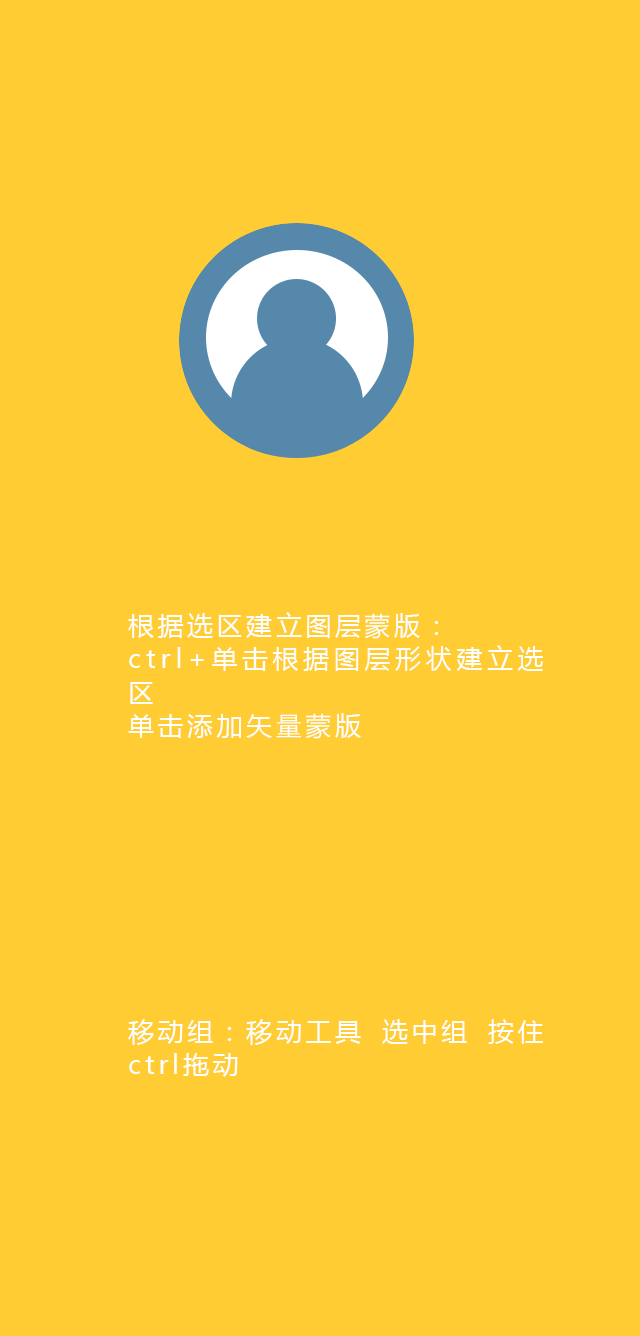
<style>
.page{position:relative;width:640px;height:1336px;background:#ffcc33}
.page>*{position:absolute;margin:0}
.t1{font:25.5px/33.4px "MicrosoftYaHei";letter-spacing:0.16em;color:#ffffff}
</style>
<div class="page">
<p class="t1" style="left:128px;top:612px;width:415px;height:127px;text-align:justify">根据选区建立图层蒙版：<br>ctrl+单击根据图层形状建立选区<br>单击添加矢量蒙版</p>
<p class="t1" style="left:128px;top:1019px;width:415px;height:58px;text-align:justify">移动组：移动工具 选中组 按住ctrl拖动</p>
</div>
